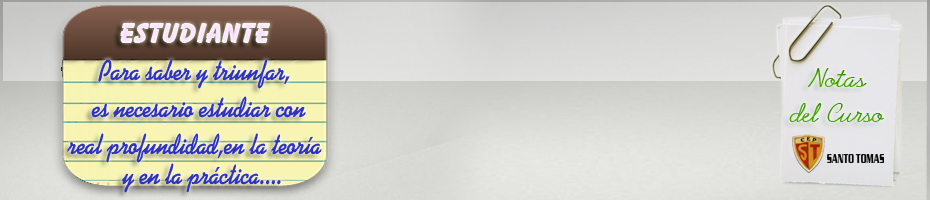
<style>
.page{position:relative;width:930px;height:200px}
.page>*{position:absolute;margin:0}
.t1{font:30px "BalloonBT-ExtraBold";color:#f8dbfa}
.t2{font:28.3px "Alako-Bold";color:#2e31c6;scale:0.85 1}
.t3{font:28.9px "AbrazoScriptSSiNormal";color:#41a404}
</style>
<div class="page">
<p class="t1" style="left:120px;top:23px;width:150px;height:20px">Estudiante</p>
<p class="t2" style="left:98px;top:59px;width:192px;height:30px">Para saber y triunfar,</p>
<p class="t3" style="left:789px;top:68px;width:95px;height:54px;text-align:center">Notas<br>del Curso</p>
<p class="t2" style="left:91px;top:96px;width:215px;height:22px">es necesario estudiar con</p>
<p class="t2" style="left:67px;top:133px;width:255px;height:30px">real profundidad,en la teoría</p>
<p class="t2" style="left:122px;top:163px;width:159px;height:30px">y en la práctica....</p>
</div>
